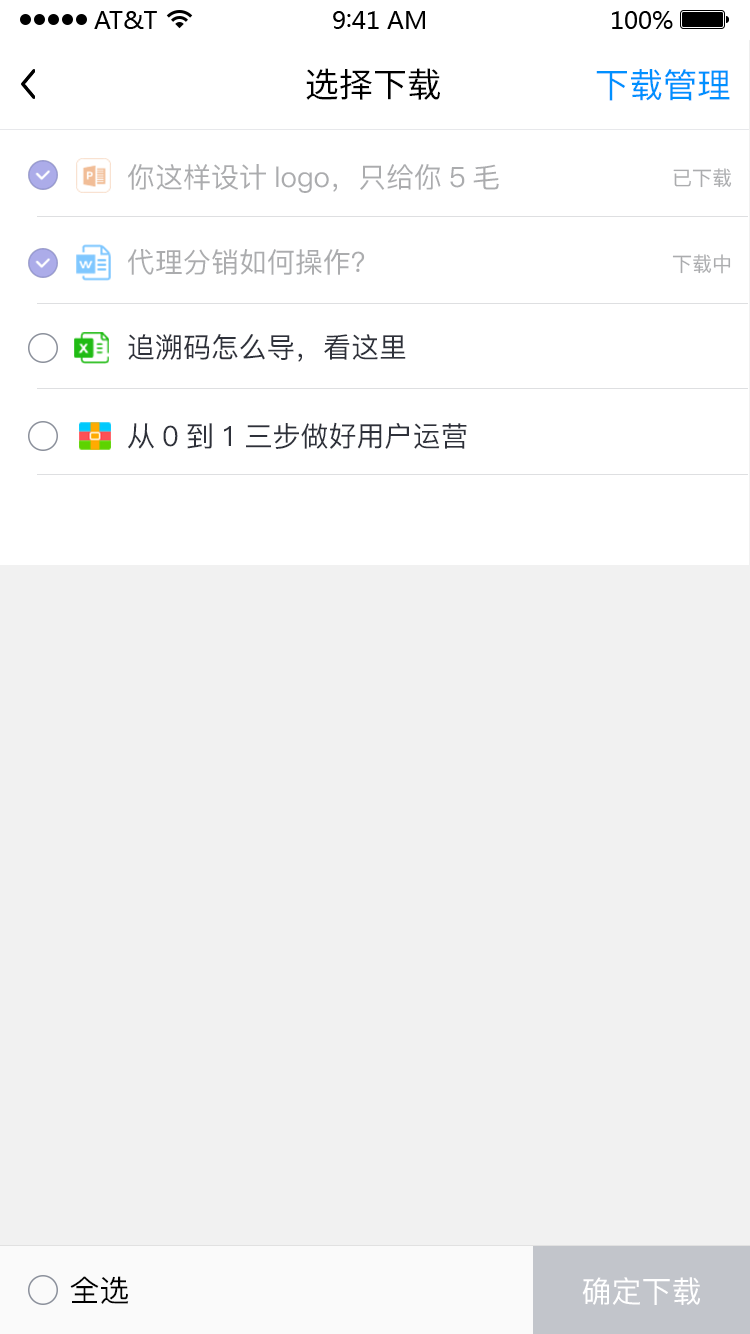
<style>
.page{position:relative;width:750px;height:1334px;background:#f1f1f1}
.page>*{position:absolute;margin:0}
.t1{font:34px "SourceHanSansCN-Regular";color:#000000}
.t2{font:34px "PingFang-SC-Medium";color:#0090ff}
.t3{font:28px "PingFang-SC-Medium";color:#abacae}
.t4{font:20px "PingFang-SC-Medium";color:#abacae}
.t5{font:28px "PingFang-SC-Medium";color:#2e313a}
.t6{font:30px "PingFang-SC-Medium";color:#000000}
.t7{font:30px "PingFang-SC-Medium";color:#ffffff}
</style>
<div class="page">
<p class="t1" style="left:306px;top:68px;width:134px;height:32px">选择下载</p>
<p class="t2" style="left:596px;top:69px;width:134px;height:32px">下载管理</p>
<p class="t3" style="left:128px;top:164px;width:371px;height:29px">你这样设计logo，只给你5毛</p>
<p class="t4" style="left:673px;top:168px;width:59px;height:20px">已下载</p>
<p class="t3" style="left:128px;top:249px;width:237px;height:26px">代理分销如何操作？</p>
<p class="t4" style="left:672px;top:254px;width:59px;height:20px">下载中</p>
<p class="t5" style="left:128px;top:334px;width:278px;height:28px">追溯码怎么导，看这里</p>
<p class="t5" style="left:128px;top:422px;width:339px;height:27px">从0到1三步做好用户运营</p>
<p class="t6" style="left:70px;top:1276px;width:59px;height:28px">全选</p>
<p class="t7" style="left:582px;top:1277px;width:118px;height:28px">确定下载</p>
</div>
